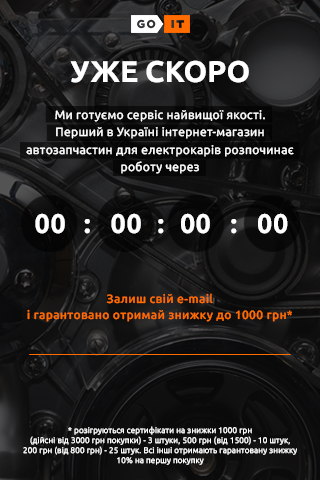
<style>
.page{position:relative;width:320px;height:480px}
.page>*{position:absolute;margin:0}
.t1{font:30px "Ubuntu-Bold";color:#ffffff}
.t2{font:12px/17.6px "Ubuntu-Regular";letter-spacing:0.025em;color:#ffffff}
.t3{font:27px "Ubuntu-Bold";letter-spacing:0.025em;color:#ffffff}
.t4{font:12px/16px "Ubuntu-Medium";letter-spacing:0.025em;color:#ff6c00}
.t5{font:8px/10px "Ubuntu-Light";letter-spacing:0.025em;color:#ffffff}
</style>
<div class="page">
<p class="t1" style="left:70px;top:60px;width:179px;height:23px">УЖЕ СКОРО</p>
<p class="t2" style="left:26px;top:110px;width:268px;height:64px;text-align:center">Ми готуємо сервіс найвищої якості.<br>Перший в Україні інтернет-магазин <br>автозапчастин для електрокарів розпочинає <br>роботу через</p>
<p class="t3" style="left:35px;top:213px;width:30px;height:21px">00</p>
<p class="t3" style="left:84px;top:219px;width:6px;height:15px">:</p>
<p class="t3" style="left:111px;top:213px;width:30px;height:21px">00</p>
<p class="t3" style="left:158px;top:219px;width:6px;height:15px">:</p>
<p class="t3" style="left:181px;top:213px;width:29px;height:21px">00</p>
<p class="t3" style="left:231px;top:219px;width:6px;height:15px">:</p>
<p class="t3" style="left:258px;top:213px;width:30px;height:21px">00</p>
<p class="t4" style="left:27px;top:293px;width:265px;height:29px;text-align:center">Залиш свій e-mail <br>і гарантовано отримай знижку до 1000 грн*</p>
<p class="t5" style="left:23px;top:426px;width:274px;height:39px;text-align:center">* розігруються сертифікати на знижки 1000 грн <br>(дійсні від 3000 грн покупки) - 3 штуки, 500 грн (від 1500) - 10 штук, <br>200 грн (від 800 грн) - 25 штук. Всі інші отримають гарантовану знижку 10% на першу покупку</p>
</div>
